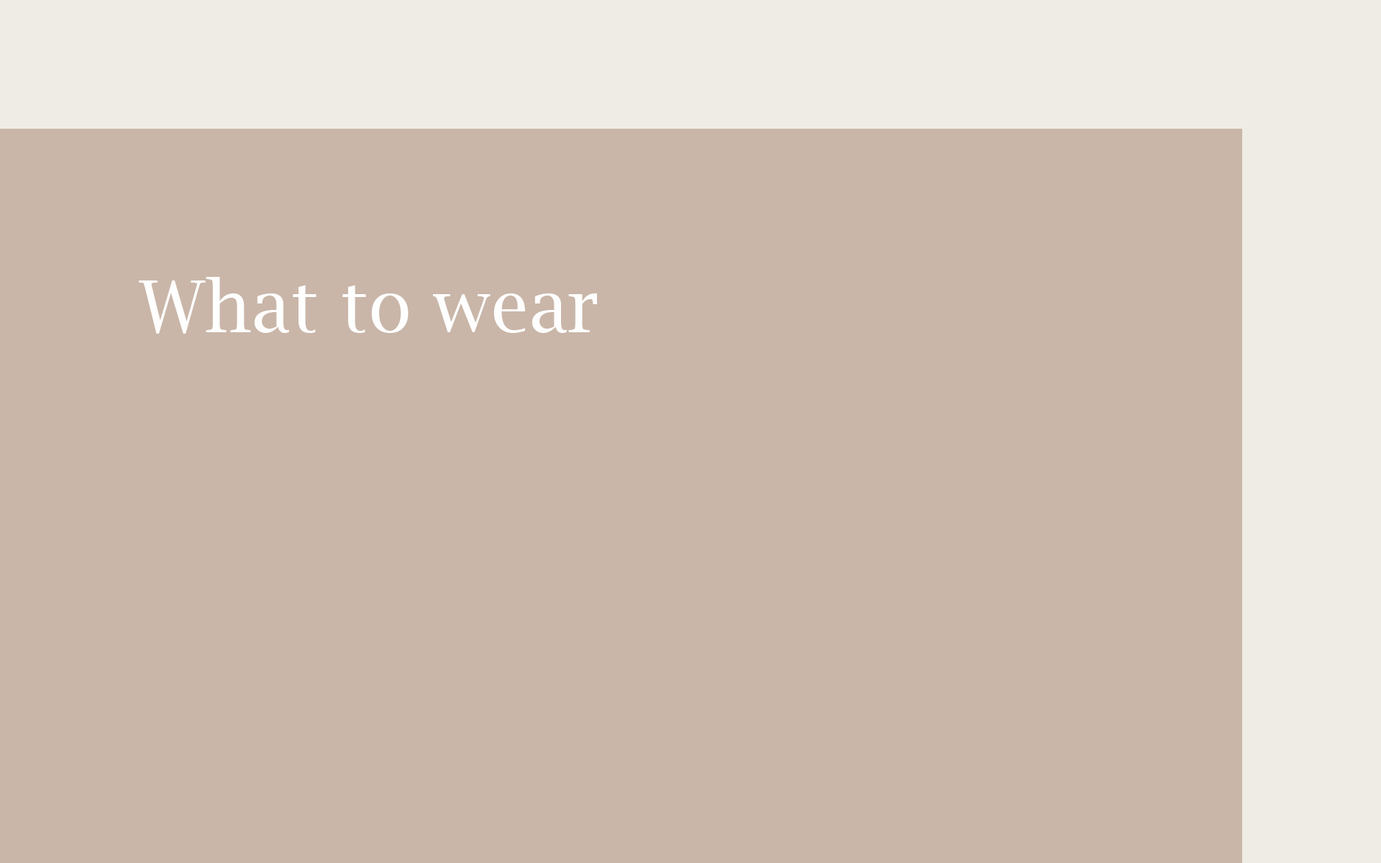
<style>
.page{position:relative;width:1381px;height:863px;background:#c9b6a8}
.page>*{position:absolute;margin:0}
.t1{font:71.8px "LucidaBright";color:#fefefe}
</style>
<div class="page">
<p class="t1" style="left:139px;top:277px;width:458px;height:57px">What to wear</p>
</div>
